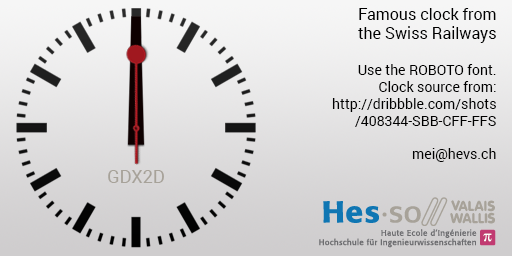
<style>
.page{position:relative;width:512px;height:256px}
.page>*{position:absolute;margin:0}
.t1{font:14px "Roboto-Regular";color:#000000}
.t2{font:16px "Roboto-Regular";color:#000000}
.t3{font:18px "Roboto-Regular";color:#a7a299}
</style>
<div class="page">
<p class="t1" style="left:332px;top:8px;width:164px;height:154px;text-align:right"><span class="t2">Famous clock from<br>the Swiss Railways<br><br></span>Use the ROBOTO font.<br>Clock source from:<br> http://dribbble.com/shots<br>/408344-SBB-CFF-FFS<br><br>mei@hevs.ch</p>
<p class="t3" style="left:108px;top:170px;width:56px;height:13px">GDX2D</p>
</div>
